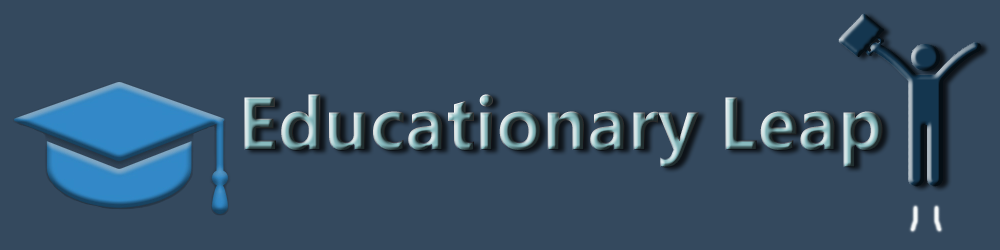
<style>
.page{position:relative;width:1000px;height:250px;background:#34495e}
.page>*{position:absolute;margin:0}
.t1{font:75px "Gadugi-Bold"}
</style>
<div class="page">
<p class="t1" style="left:244px;top:94px;width:639px;height:74px">Educationary Leap</p>
</div>
